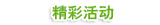
<style>
.page{position:relative;width:160px;height:25px;background:#ffffff}
.page>*{position:absolute;margin:0}
.t1{font:15px "HeitiCSEG";color:#64b207;scale:1.04 1}
</style>
<div class="page">
<p class="t1" style="left:52px;top:5px;width:62px;height:15px">精彩活动</p>
</div>
